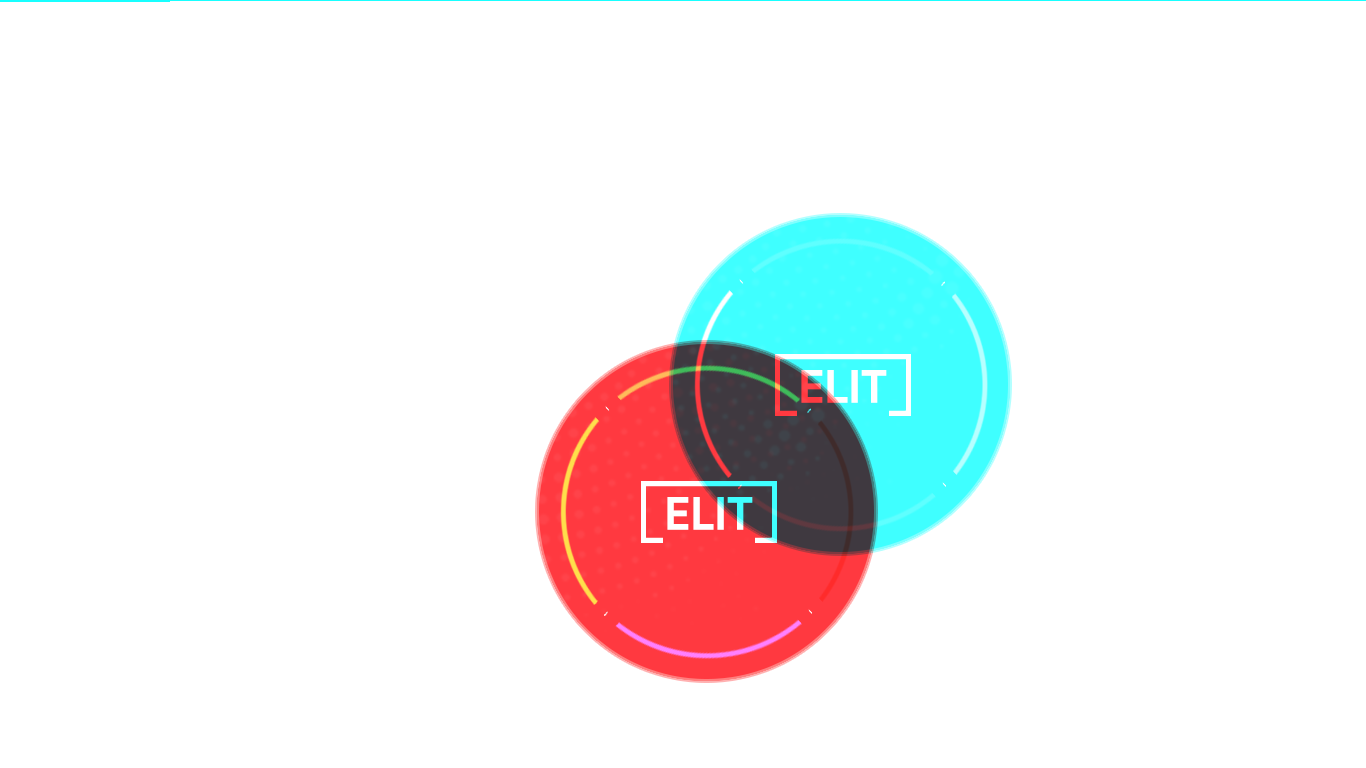
<style>
.page{position:relative;width:1366px;height:768px;background:#ffffff}
.page>*{position:absolute;margin:0}
.t1{font:45.8px "ProductSans-Bold";letter-spacing:-0.01em}
</style>
<div class="page">
<p class="t1" style="left:667px;top:369px;width:86px;height:33px">ELIT</p>
</div>
